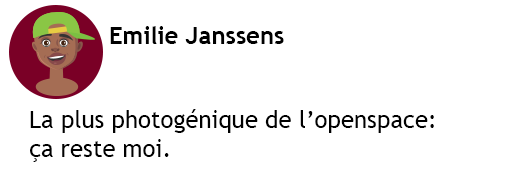
<style>
.page{position:relative;width:512px;height:188px;background:#ffffff}
.page>*{position:absolute;margin:0}
.t1{font:24px "TrebuchetMS-Bold";color:#000000}
.t2{font:24px "TrebuchetMS";color:#000000}
</style>
<div class="page">
<p class="t1" style="left:110px;top:26px;width:174px;height:18px">Emilie Janssens</p>
<p class="t2" style="left:30px;top:109px;width:404px;height:53px">La plus photogénique de l’openspace:<br>ça reste moi.</p>
</div>
